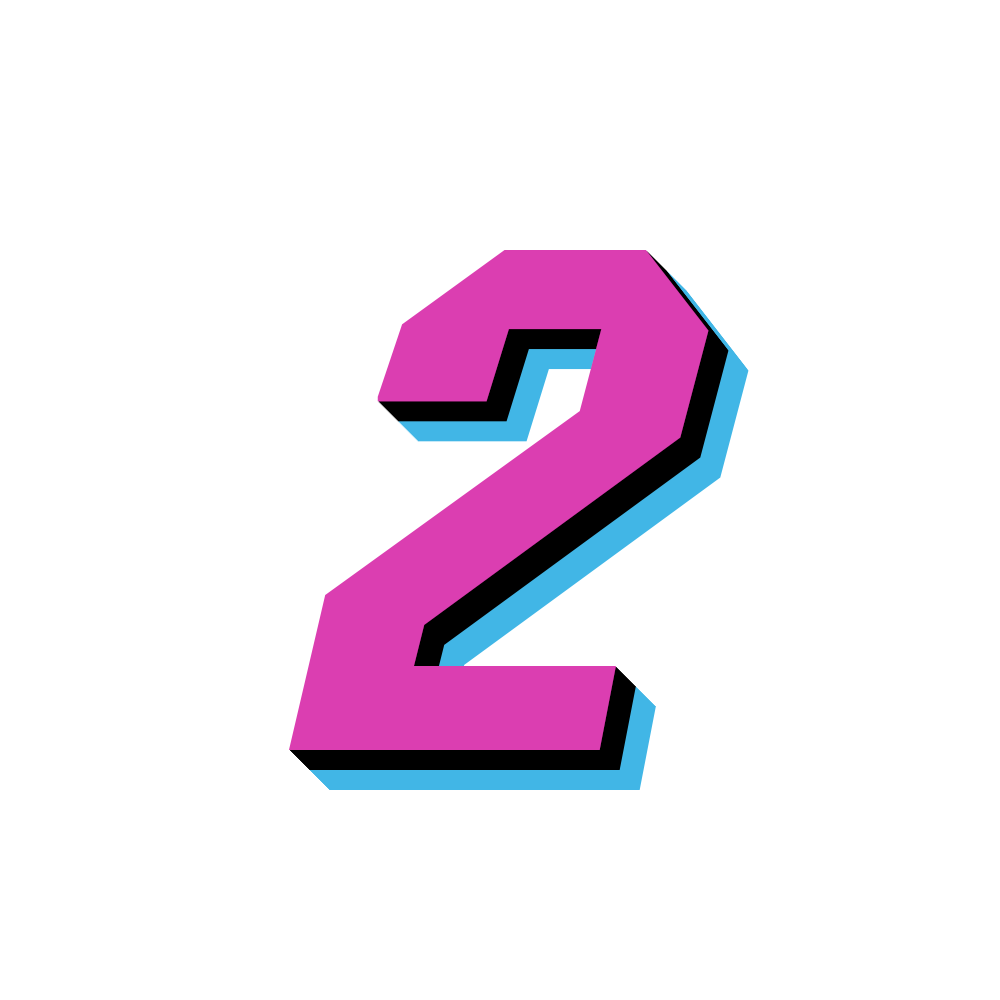
<style>
.page{position:relative;width:1000px;height:1000px;background:#ffffff}
.page>*{position:absolute;margin:0}
.t1{font:625px "NBAHeat";color:#db3eb1}
</style>
<div class="page">
<p class="t1" style="left:289px;top:250px;width:420px;height:500px">2</p>
</div>
